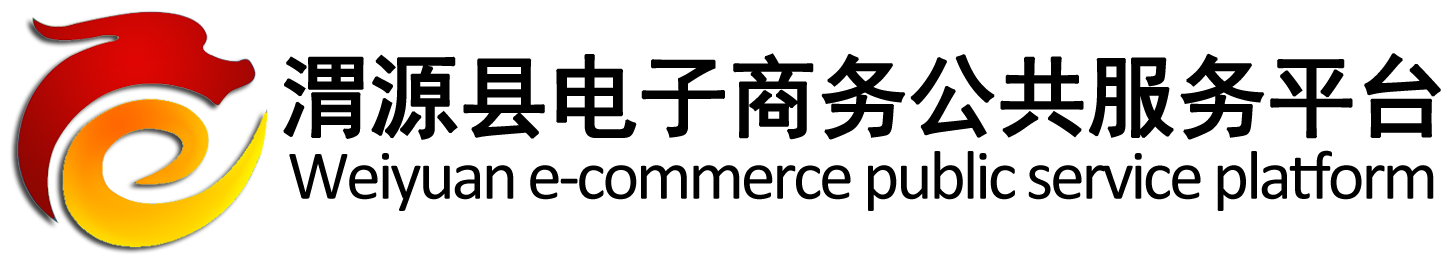
<style>
.page{position:relative;width:1450px;height:260px;background:#ffffff}
.page>*{position:absolute;margin:0}
.t1{font:90px "SimHei";letter-spacing:-0.03em;color:#000000;font-weight:bold}
.t2{font:70px "Calibri";letter-spacing:-0.05em;color:#000000}
</style>
<div class="page">
<p class="t1" style="left:283px;top:53px;width:1158px;height:87px">渭源县电子商务公共服务平台</p>
<p class="t2" style="left:289px;top:150px;width:1145px;height:61px">Weiyuan e-commerce public service platform</p>
</div>
